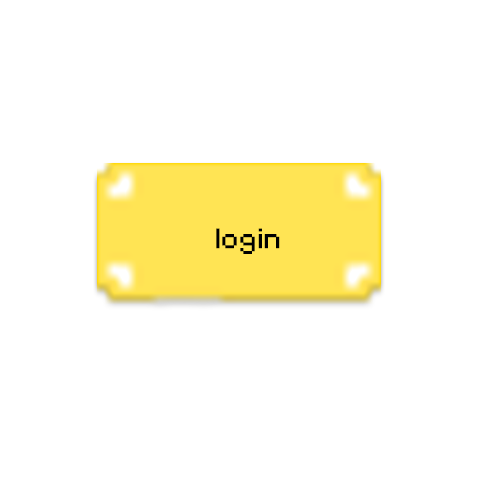
<style>
.page{position:relative;width:500px;height:500px;background:#ffffff}
.page>*{position:absolute;margin:0}
.t1{font:31px "PixelifySans-Regular";color:#000000}
</style>
<div class="page">
<p class="t1" style="left:216px;top:228px;width:64px;height:26px">login</p>
</div>
